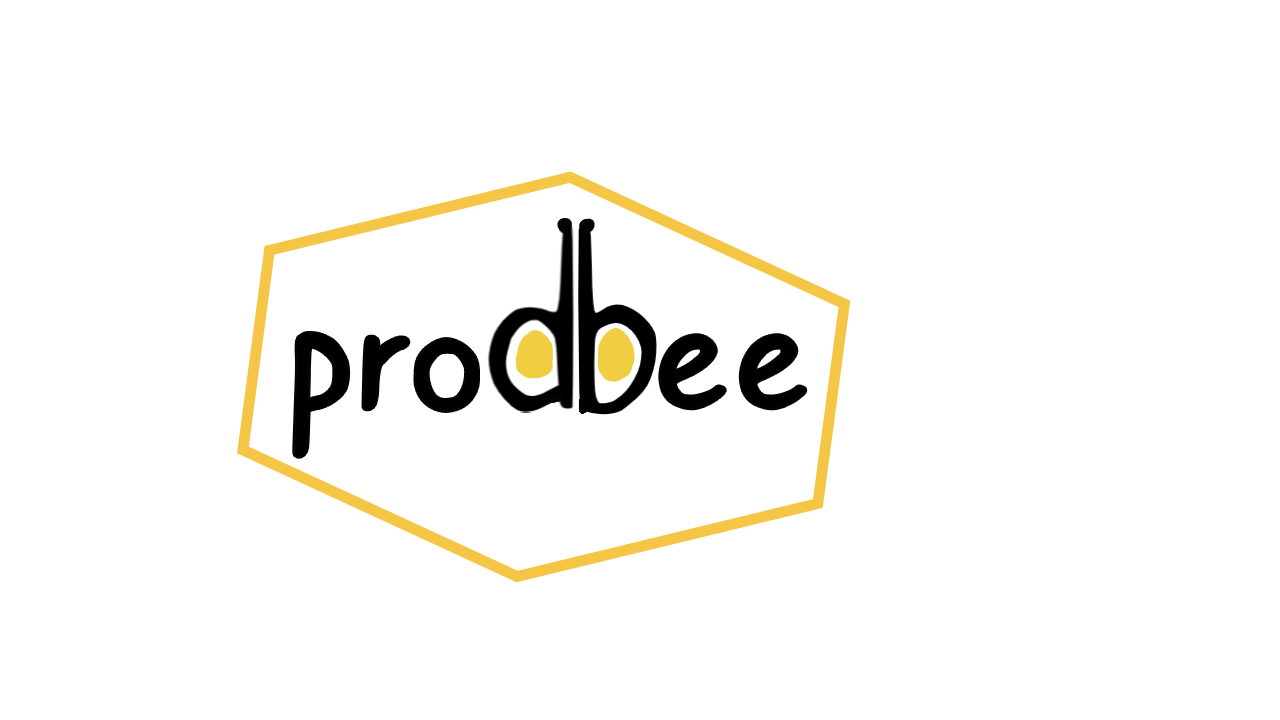
<style>
.page{position:relative;width:1280px;height:720px;background:#ffffff}
.page>*{position:absolute;margin:0}
.t1{font:197.6px "Caroni-Regular";color:#000000;scale:1.11 1}
.t2{font:197.2px "Caroni-Regular";color:#000000;scale:1.11 1}
</style>
<div class="page">
<p class="t1" style="left:295px;top:334px;width:182px;height:122px;rotate:1deg"><span class="t2">p</span>ro</p>
<p class="t2" style="left:661px;top:336px;width:144px;height:72px">ee</p>
</div>
